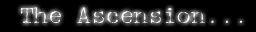
<style>
.page{position:relative;width:256px;height:32px;background:#000000}
.page>*{position:absolute;margin:0}
.t1{font:24px "McGareyFractured";color:#fefefe}
</style>
<div class="page">
<p class="t1" style="left:21px;top:7px;width:221px;height:16px">The Ascension...</p>
</div>
